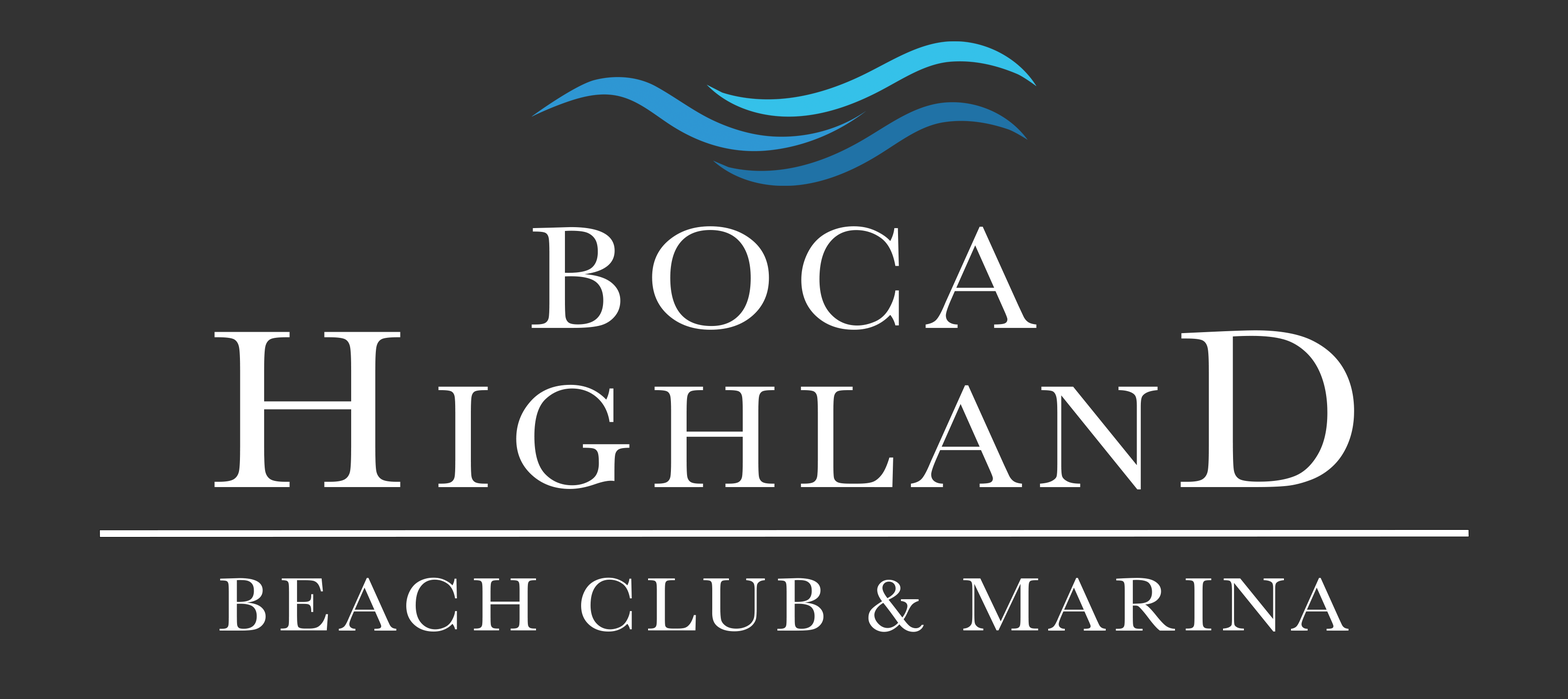
<style>
.page{position:relative;width:1568px;height:699px;background:#333333}
.page>*{position:absolute;margin:0}
.t1{font:150.7px "Baskerville";letter-spacing:0.1em;color:#ffffff;scale:1.07 1}
.t2{font:151.4px "Baskerville";letter-spacing:0.1em;color:#ffffff;scale:1.07 1}
.t3{font:234.5px "Baskerville";letter-spacing:0.1em;color:#ffffff;scale:1.07 1}
.t4{font:78.4px "Baskerville";letter-spacing:0.1em;color:#ffffff;scale:1.07 1}
</style>
<div class="page">
<p class="t1" style="left:532px;top:226px;width:505px;height:104px">BOCA</p>
<p class="t2" style="left:214px;top:330px;width:1140px;height:159px"><span class="t3">H</span>IGHLAN<span class="t3">D</span></p>
<p class="t4" style="left:220px;top:577px;width:1128px;height:55px">BEACH CLUB &amp; MARINA</p>
</div>
